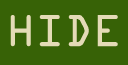
<style>
.page{position:relative;width:128px;height:65px;background:#376206}
.page>*{position:absolute;margin:0}
.t1{font:48px "OCRAExtended";color:#e4dbb7}
</style>
<div class="page">
<p class="t1" style="left:10px;top:15px;width:108px;height:32px">HIDE</p>
</div>
